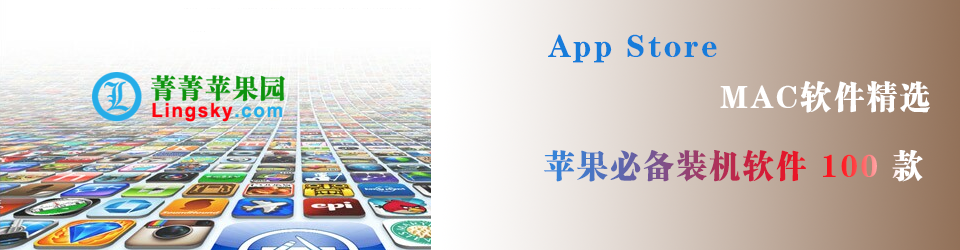
<style>
.page{position:relative;width:960px;height:250px}
.page>*{position:absolute;margin:0}
.t1{font:32px "FZCSK--GBK1-0";letter-spacing:0.09em;color:#167cda;scale:0.95 1}
.t2{font:32px "FZCSK--GBK1-0";letter-spacing:0.09em;color:#ffffff;scale:0.95 1}
.t3{font:32px "FZCSK--GBK1-0";letter-spacing:0.09em;scale:0.95 1}
</style>
<div class="page">
<p class="t1" style="left:548px;top:34px;width:169px;height:29px">App Store</p>
<p class="t2" style="left:720px;top:81px;width:210px;height:32px">MAC软件精选</p>
<p class="t3" style="left:544px;top:150px;width:379px;height:32px">苹果必备装机软件 100 款</p>
</div>
